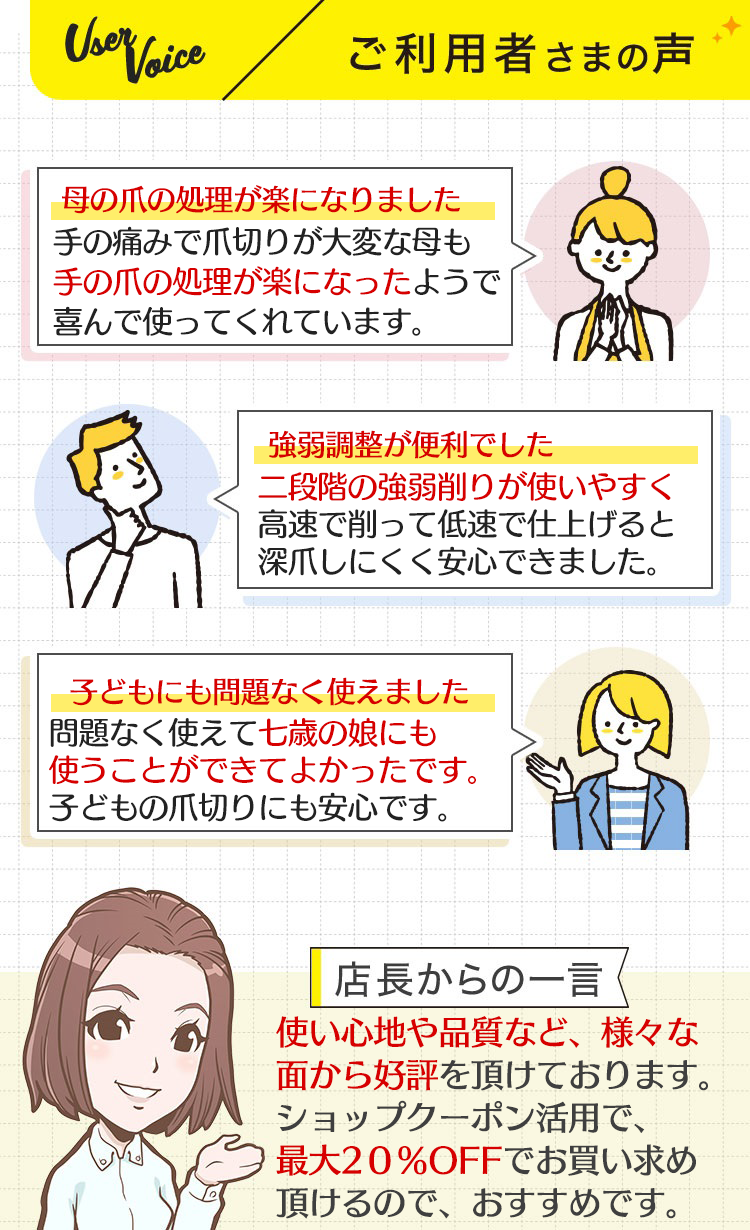
<style>
.page{position:relative;width:750px;height:1230px;background:#ffffff}
.page>*{position:absolute;margin:0}
.t1{font:29.3px "SkipStd-D";letter-spacing:-0.025em;color:#d70000}
.t2{font:30.7px/40px "HummingStd-D";letter-spacing:-0.025em;color:#222222}
.t3{font:30.7px/40px "HummingStd-D";letter-spacing:-0.025em;color:#d70000}
.t4{font:30.7px/37.3px "HummingStd-D";letter-spacing:-0.025em;color:#222222}
.t5{font:30.7px/37.3px "HummingStd-D";letter-spacing:-0.025em;color:#d70000}
.t6{font:33.3px/42.7px "SkipStd-D";letter-spacing:-0.025em;color:#3f3f3f}
.t7{font:33.3px/42.7px "SkipStd-D";letter-spacing:-0.025em;color:#d70000}
</style>
<div class="page">
<p class="t1" style="left:62px;top:185px;width:398px;height:29px">母の爪の処理が楽になりました</p>
<p class="t2" style="left:53px;top:226px;width:448px;height:110px">手の痛みで爪切りが大変な母も<br><span class="t3">手の爪の処理が楽になった</span>ようで<br>喜んで使ってくれています。</p>
<p class="t1" style="left:269px;top:430px;width:284px;height:29px">強弱調整が便利でした</p>
<p class="t4" style="left:258px;top:471px;width:415px;height:105px"><span class="t5">二段階の強弱削りが使いやすく<br></span>高速で削って低速で仕上げると<br>深爪しにくく安心できました。</p>
<p class="t1" style="left:70px;top:677px;width:398px;height:29px">子どもにも問題なく使えました</p>
<p class="t5" style="left:49px;top:717px;width:427px;height:105px"><span class="t4">問題なく使えて</span>七歳の娘にも<br>使うことができてよかったです。<br><span class="t4">子どもの爪切りにも安心です。</span></p>
<p class="t6" style="left:276px;top:1016px;width:432px;height:203px"><span class="t7">使い心地や品質など、様々な<br>面から好評</span>を頂けております。<br>ショップクーポン活用で、<br><span class="t7">最大2０％OFF</span>でお買い求め<br>頂けるので、おすすめです。</p>
</div>
